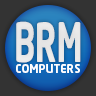
<style>
.page{position:relative;width:96px;height:96px;background:#333333}
.page>*{position:absolute;margin:0}
.t1{font:53.6px "NeoTech-Bold";color:#e6e6e6;scale:0.59 1}
.t2{font:11.8px "NeoTech-Bold";color:#ffffff;scale:0.94 1}
</style>
<div class="page">
<p class="t1" style="left:16px;top:21px;width:65px;height:42px">BRM</p>
<p class="t2" style="left:16px;top:64px;width:64px;height:9px">COMPUTERS</p>
</div>
